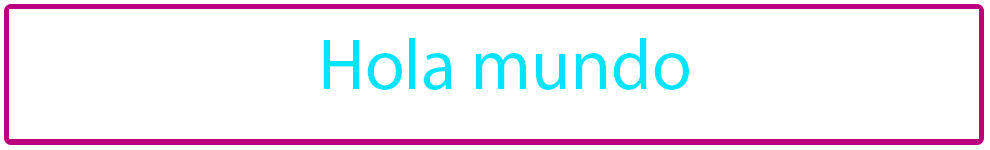
<style>
.page{position:relative;width:990px;height:150px;background:#ffffff}
.page>*{position:absolute;margin:0}
.t1{font:72px "MyriadPro-Regular";color:#00e4ff}
.t2{font:72px "MyriadPro-Regular";color:#f6ff00}
</style>
<div class="page">
<p class="t1" style="left:323px;top:38px;width:366px;height:52px"><span class="t2"><br></span>Hola mundo</p>
</div>
